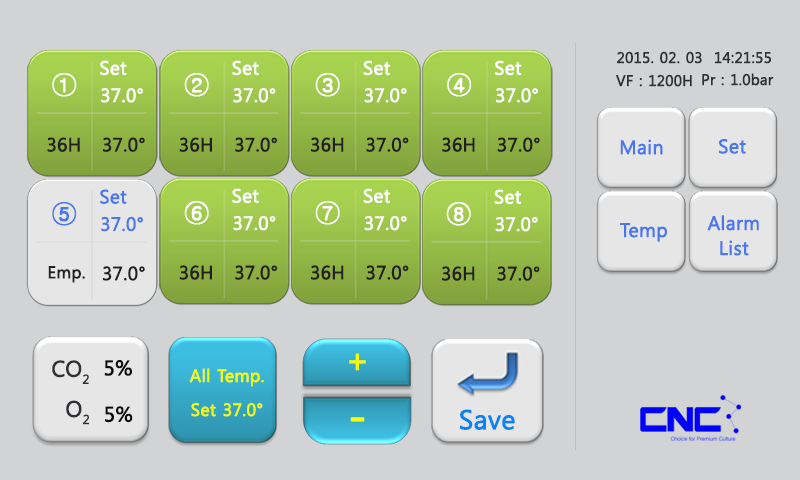
<style>
.page{position:relative;width:800px;height:480px;background:#d1d3d4}
.page>*{position:absolute;margin:0}
.t1{font:14.7px "MalgunGothicRegular";color:#2f3033;font-weight:bold}
.t2{font:18.4px "MalgunGothicRegular";color:#ffffff;font-weight:bold}
.t3{font:25.7px "Gulim";color:#ffffff;font-weight:bold}
.t4{font:18.4px "MalgunGothicRegular";color:#231f20;font-weight:bold}
.t5{font:18.8px "MalgunGothicRegular";color:#4b77ee;font-weight:bold}
.t6{font:18.4px "MalgunGothicRegular";color:#4b77ee;font-weight:bold}
.t7{font:25.7px "Gulim";color:#4b77ee;font-weight:bold}
.t8{font:18.8px/25px "MalgunGothicRegular";color:#4b77ee;font-weight:bold}
.t9{font:16.5px "MalgunGothicRegular";color:#231f20;font-weight:bold}
.t10{font:33.1px "MalgunGothicRegular";color:#f9fc01;font-weight:bold}
.t11{font:21.6px "MalgunGothicRegular";color:#2f3033;font-weight:bold}
.t12{font:20.4px "MalgunGothicRegular";color:#0a0b0b;font-weight:bold}
.t13{font:17px "MalgunGothicRegular";color:#f3fc02;font-weight:bold}
.t14{font:26.2px "MalgunGothicRegular";color:#0783f7;font-weight:bold}
.t15{font:44.1px "MalgunGothicRegular";color:#f9fc01;font-weight:bold}
</style>
<div class="page">
<p class="t1" style="left:617px;top:51px;width:154px;height:13px">2015. 02. 03  14:21:55</p>
<p class="t2" style="left:100px;top:60px;width:27px;height:16px">Set</p>
<p class="t2" style="left:232px;top:60px;width:27px;height:16px">Set</p>
<p class="t2" style="left:363px;top:60px;width:27px;height:16px">Set</p>
<p class="t2" style="left:495px;top:60px;width:27px;height:16px">Set</p>
<p class="t3" style="left:52px;top:73px;width:25px;height:24px">①</p>
<p class="t3" style="left:184px;top:73px;width:25px;height:24px">②</p>
<p class="t3" style="left:315px;top:73px;width:25px;height:24px">③</p>
<p class="t3" style="left:447px;top:73px;width:25px;height:24px">④</p>
<p class="t1" style="left:616px;top:74px;width:76px;height:13px">VF : 1200H</p>
<p class="t1" style="left:702px;top:73px;width:72px;height:13px">Pr : 1.0bar</p>
<p class="t2" style="left:101px;top:88px;width:42px;height:15px">37.0°</p>
<p class="t2" style="left:233px;top:88px;width:43px;height:15px">37.0°</p>
<p class="t2" style="left:364px;top:88px;width:43px;height:15px">37.0°</p>
<p class="t2" style="left:496px;top:88px;width:42px;height:15px">37.0°</p>
<p class="t4" style="left:47px;top:137px;width:33px;height:15px">36H</p>
<p class="t4" style="left:103px;top:137px;width:42px;height:15px">37.0°</p>
<p class="t4" style="left:179px;top:137px;width:33px;height:15px">36H</p>
<p class="t4" style="left:235px;top:137px;width:43px;height:15px">37.0°</p>
<p class="t4" style="left:311px;top:137px;width:33px;height:15px">36H</p>
<p class="t4" style="left:366px;top:137px;width:43px;height:15px">37.0°</p>
<p class="t4" style="left:442px;top:137px;width:33px;height:15px">36H</p>
<p class="t4" style="left:497px;top:137px;width:43px;height:15px">37.0°</p>
<p class="t5" style="left:620px;top:139px;width:43px;height:16px">Main</p>
<p class="t5" style="left:719px;top:139px;width:27px;height:15px">Set</p>
<p class="t6" style="left:100px;top:189px;width:27px;height:15px">Set</p>
<p class="t2" style="left:232px;top:188px;width:27px;height:15px">Set</p>
<p class="t2" style="left:363px;top:188px;width:27px;height:15px">Set</p>
<p class="t2" style="left:494px;top:189px;width:27px;height:15px">Set</p>
<p class="t7" style="left:52px;top:202px;width:25px;height:24px">⑤</p>
<p class="t3" style="left:184px;top:201px;width:25px;height:24px">⑥</p>
<p class="t3" style="left:315px;top:201px;width:25px;height:24px">⑦</p>
<p class="t3" style="left:446px;top:202px;width:25px;height:24px">⑧</p>
<p class="t6" style="left:101px;top:216px;width:42px;height:16px">37.0°</p>
<p class="t2" style="left:233px;top:216px;width:43px;height:15px">37.0°</p>
<p class="t2" style="left:364px;top:216px;width:43px;height:15px">37.0°</p>
<p class="t2" style="left:495px;top:217px;width:43px;height:15px">37.0°</p>
<p class="t8" style="left:707px;top:215px;width:52px;height:41px;text-align:center">Alarm<br>List</p>
<p class="t5" style="left:620px;top:223px;width:47px;height:19px">Temp</p>
<p class="t9" style="left:48px;top:266px;width:37px;height:17px">Emp.</p>
<p class="t4" style="left:103px;top:266px;width:42px;height:15px">37.0°</p>
<p class="t4" style="left:179px;top:265px;width:33px;height:15px">36H</p>
<p class="t4" style="left:235px;top:265px;width:43px;height:15px">37.0°</p>
<p class="t4" style="left:311px;top:265px;width:33px;height:15px">36H</p>
<p class="t4" style="left:366px;top:265px;width:43px;height:15px">37.0°</p>
<p class="t4" style="left:442px;top:266px;width:33px;height:15px">36H</p>
<p class="t4" style="left:497px;top:266px;width:43px;height:15px">37.0°</p>
<p class="t10" style="left:349px;top:353px;width:17px;height:18px">+</p>
<p class="t11" style="left:52px;top:360px;width:37px;height:24px">CO2</p>
<p class="t12" style="left:104px;top:360px;width:28px;height:16px">5%</p>
<p class="t13" style="left:189px;top:368px;width:75px;height:19px">All Temp.</p>
<p class="t11" style="left:66px;top:400px;width:23px;height:25px">O2</p>
<p class="t12" style="left:105px;top:406px;width:28px;height:17px">5%</p>
<p class="t13" style="left:191px;top:403px;width:72px;height:14px">Set 37.0°</p>
<p class="t14" style="left:460px;top:409px;width:55px;height:21px">Save</p>
<p class="t15" style="left:350px;top:417px;width:15px;height:5px;rotate:180deg">-</p>
</div>
